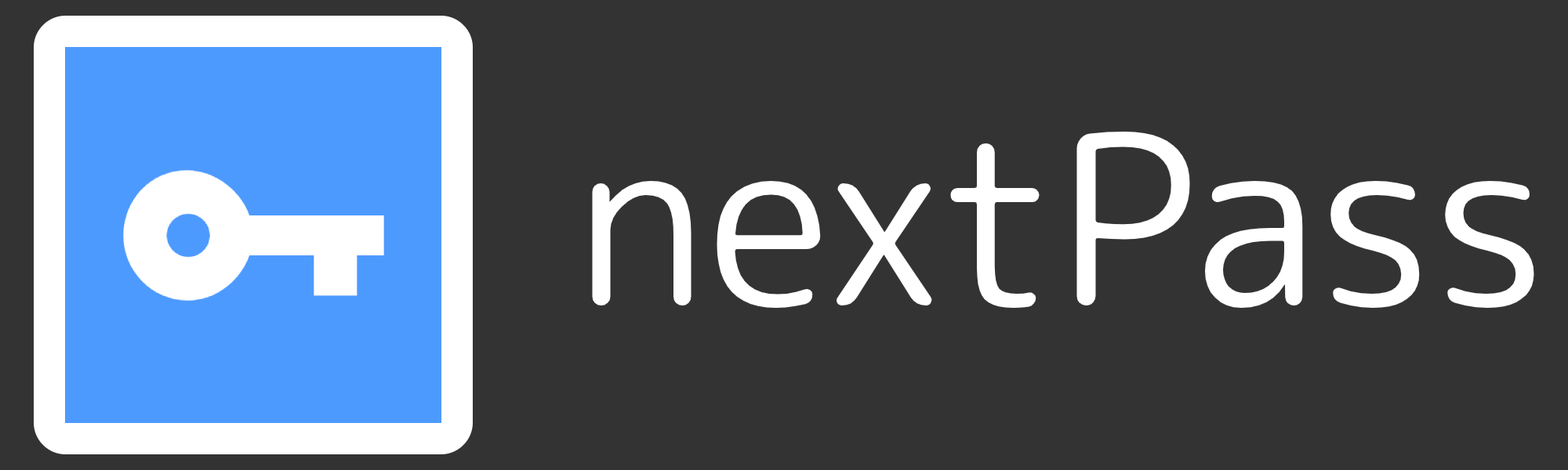
<style>
.page{position:relative;width:1568px;height:470px;background:#333333}
.page>*{position:absolute;margin:0}
.t1{font:235.2px "RoundedMplus1c-Regular";color:#ffffff}
</style>
<div class="page">
<p class="t1" style="left:592px;top:132px;width:942px;height:176px">nextPass</p>
</div>
